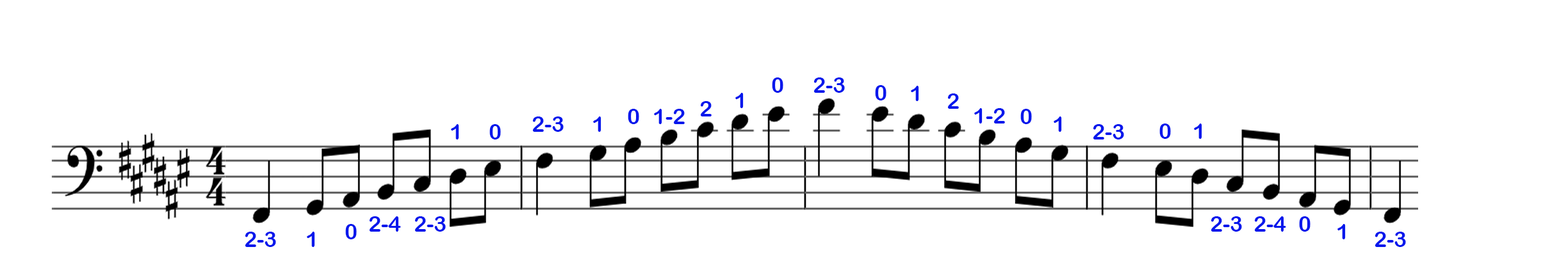
<style>
.page{position:relative;width:1568px;height:279px;background:#ffffff}
.page>*{position:absolute;margin:0}
.t1{font:21.8px "ArialRoundedMTBold";color:#0417ec}
</style>
<div class="page">
<p class="t1" style="left:772px;top:78px;width:11px;height:15px">0</p>
<p class="t1" style="left:813px;top:78px;width:32px;height:15px">2-3</p>
<p class="t1" style="left:875px;top:85px;width:11px;height:16px">0</p>
<p class="t1" style="left:911px;top:86px;width:8px;height:15px">1</p>
<p class="t1" style="left:700px;top:101px;width:12px;height:16px">2</p>
<p class="t1" style="left:735px;top:93px;width:9px;height:15px">1</p>
<p class="t1" style="left:947px;top:94px;width:12px;height:15px">2</p>
<p class="t1" style="left:628px;top:109px;width:11px;height:15px">0</p>
<p class="t1" style="left:654px;top:109px;width:31px;height:15px">1-2</p>
<p class="t1" style="left:974px;top:108px;width:31px;height:16px">1-2</p>
<p class="t1" style="left:1020px;top:109px;width:12px;height:15px">0</p>
<p class="t1" style="left:451px;top:124px;width:8px;height:16px">1</p>
<p class="t1" style="left:489px;top:124px;width:12px;height:16px">0</p>
<p class="t1" style="left:532px;top:117px;width:32px;height:15px">2-3</p>
<p class="t1" style="left:593px;top:117px;width:8px;height:15px">1</p>
<p class="t1" style="left:1054px;top:117px;width:8px;height:15px">1</p>
<p class="t1" style="left:1093px;top:124px;width:31px;height:16px">2-3</p>
<p class="t1" style="left:1159px;top:124px;width:12px;height:15px">0</p>
<p class="t1" style="left:1194px;top:124px;width:8px;height:15px">1</p>
<p class="t1" style="left:369px;top:216px;width:32px;height:16px">2-4</p>
<p class="t1" style="left:414px;top:216px;width:32px;height:16px">2-3</p>
<p class="t1" style="left:1211px;top:216px;width:31px;height:16px">2-3</p>
<p class="t1" style="left:1254px;top:216px;width:32px;height:16px">2-4</p>
<p class="t1" style="left:1299px;top:216px;width:12px;height:16px">0</p>
<p class="t1" style="left:245px;top:232px;width:31px;height:15px">2-3</p>
<p class="t1" style="left:307px;top:232px;width:8px;height:15px">1</p>
<p class="t1" style="left:345px;top:224px;width:12px;height:16px">0</p>
<p class="t1" style="left:1337px;top:224px;width:9px;height:16px">1</p>
<p class="t1" style="left:1375px;top:232px;width:31px;height:15px">2-3</p>
</div>
